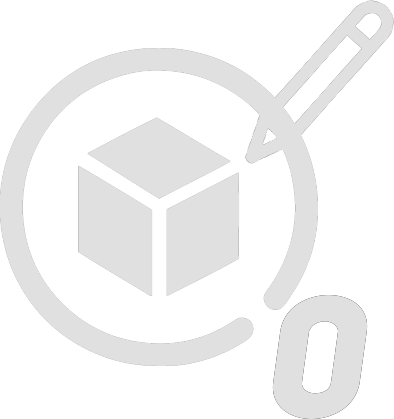
<style>
.page{position:relative;width:394px;height:419px;background:#ffffff}
.page>*{position:absolute;margin:0}
.t1{font:168.9px "UniSansHeavyCapsItalic";color:#e0e0e0}
</style>
<div class="page">
<p class="t1" style="left:272px;top:295px;width:96px;height:125px">0</p>
</div>
